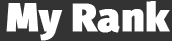
<style>
.page{position:relative;width:172px;height:41px;background:#333333}
.page>*{position:absolute;margin:0}
.t1{font:40px "FiraSans-Black";color:#ffffff;font-weight:bold}
</style>
<div class="page">
<p class="t1" style="left:6px;top:1px;width:164px;height:40px">My Rank</p>
</div>
